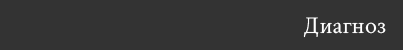
<style>
.page{position:relative;width:403px;height:50px;background:#333333}
.page>*{position:absolute;margin:0}
.t1{font:24px "CrimsonText-Regular";color:#ffffff}
</style>
<div class="page">
<p class="t1" style="left:303px;top:17px;width:83px;height:21px">Диагноз</p>
</div>
